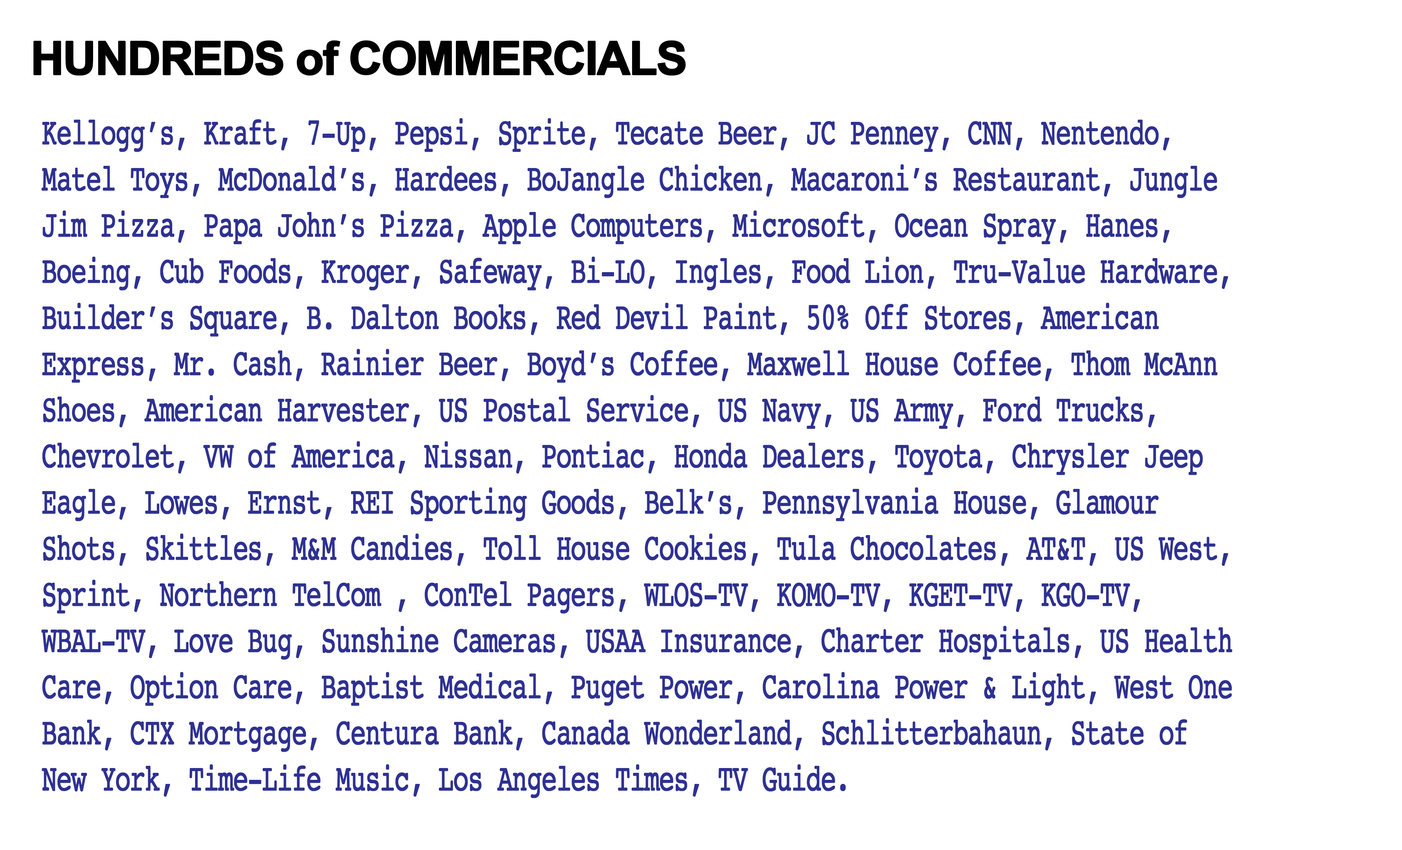
<style>
.page{position:relative;width:1402px;height:850px;background:#ffffff}
.page>*{position:absolute;margin:0}
.t1{font:46.2px "Arial-BoldMT";letter-spacing:-0.05em;color:#000000;font-weight:bold}
.t2{font:38.5px "Courier";letter-spacing:-0.05em;color:#2e3192;font-weight:bold;scale:0.66 1}
</style>
<div class="page">
<p class="t1" style="left:33px;top:40px;width:653px;height:36px">HUNDREDS of COMMERCIALS</p>
<p class="t2" style="left:41px;top:118px;width:1191px;height:681px">Kellogg’s, Kraft, 7-Up, Pepsi, Sprite, Tecate Beer, JC Penney, CNN, Nentendo, Matel Toys, McDonald’s, Hardees, BoJangle Chicken, Macaroni’s Restaurant, Jungle Jim Pizza, Papa John’s Pizza, Apple Computers, Microsoft, Ocean Spray, Hanes, Boeing, Cub Foods, Kroger, Safeway, Bi-LO, Ingles, Food Lion, Tru-Value Hardware, Builder’s Square, B. Dalton Books, Red Devil Paint, 50% Off Stores, American Express, Mr. Cash, Rainier Beer, Boyd’s Coffee, Maxwell House Coffee, Thom McAnn Shoes, American Harvester, US Postal Service, US Navy, US Army, Ford Trucks, Chevrolet, VW of America, Nissan, Pontiac, Honda Dealers, Toyota, Chrysler Jeep Eagle, Lowes, Ernst, REI Sporting Goods, Belk’s, Pennsylvania House, Glamour Shots, Skittles, M&amp;M Candies, Toll House Cookies, Tula Chocolates, AT&amp;T, US West, Sprint, Northern TelCom , ConTel Pagers, WLOS-TV, KOMO-TV, KGET-TV, KGO-TV, WBAL-TV, Love Bug, Sunshine Cameras, USAA Insurance, Charter Hospitals, US Health Care, Option Care, Baptist Medical, Puget Power, Carolina Power &amp; Light, West One Bank, CTX Mortgage, Centura Bank, Canada Wonderland, Schlitterbahaun, State of New York, Time-Life Music, Los Angeles Times, TV Guide.</p>
</div>
